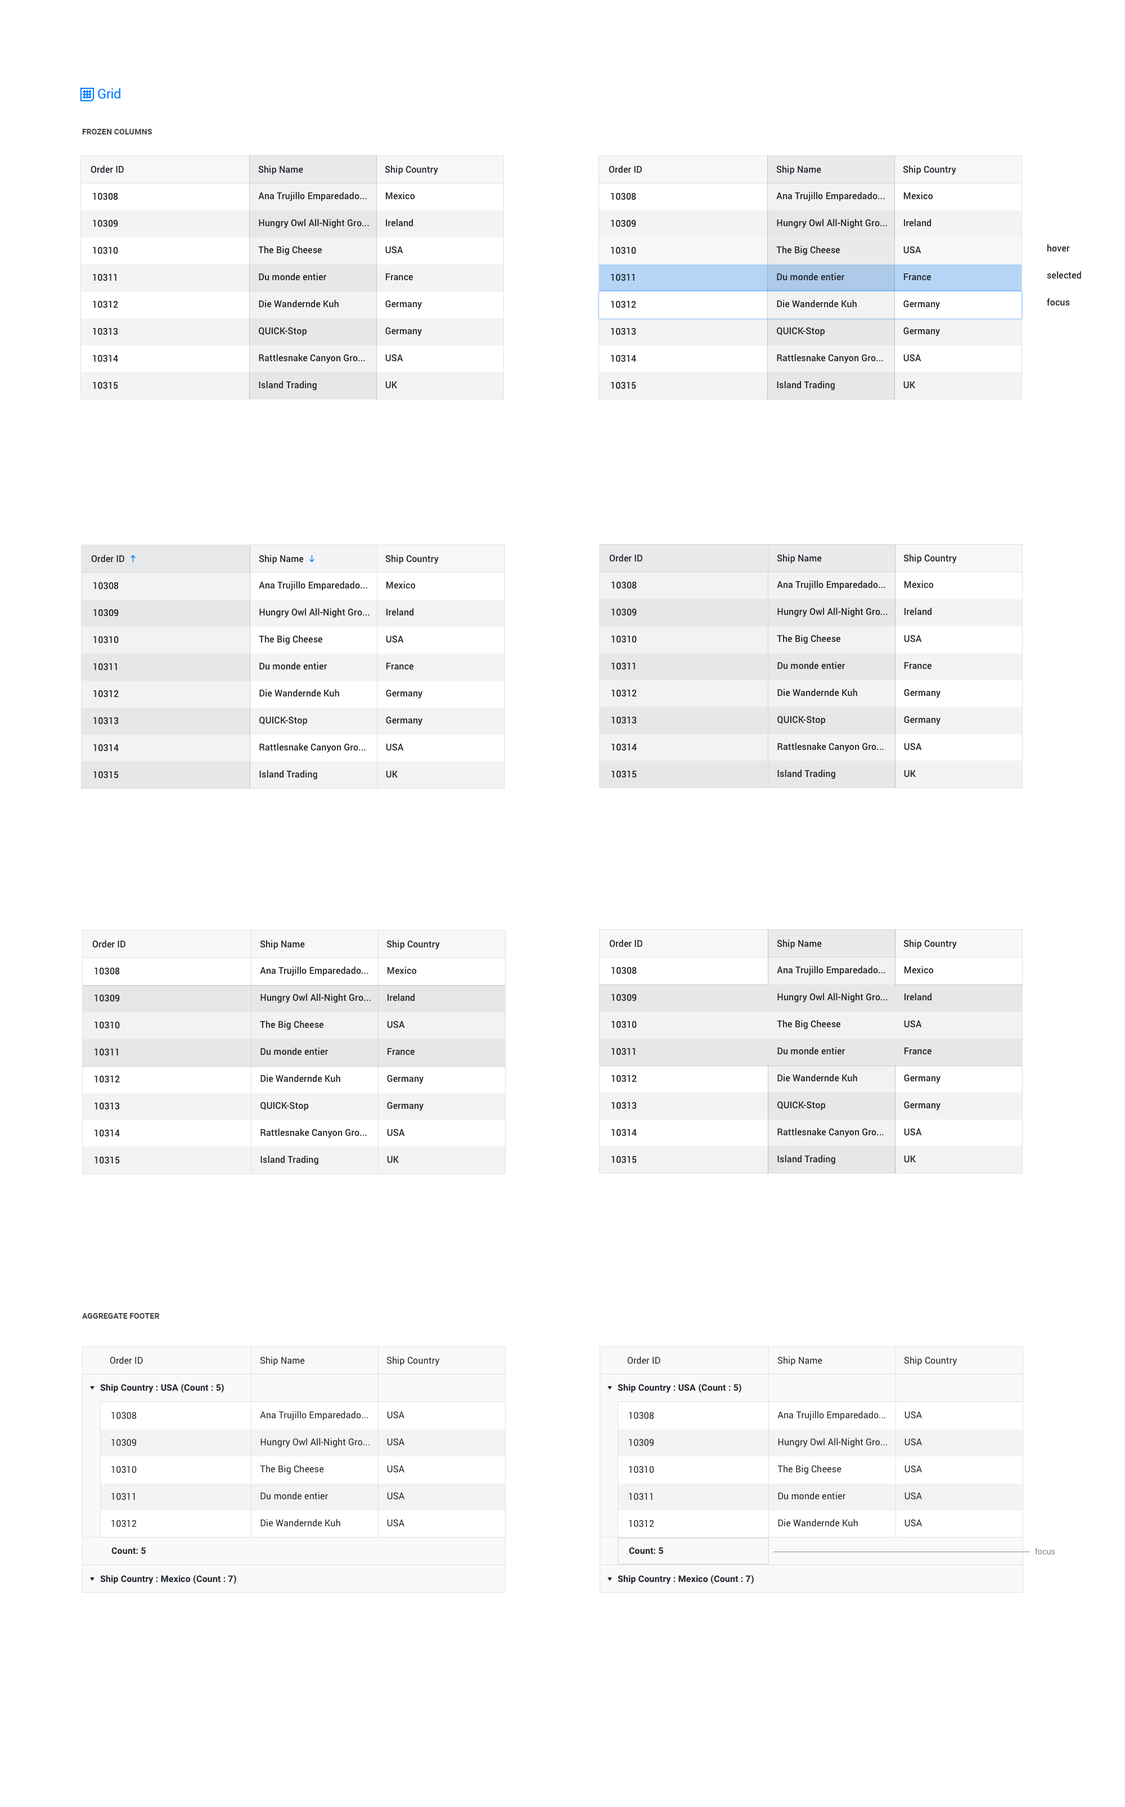
<style>
.page{position:relative;width:1125px;height:1807px;background:#ffffff}
.page>*{position:absolute;margin:0}
.t1{font:13.5px "Roboto-Regular";letter-spacing:-0.025em;color:#007bff}
.t2{font:7.9px "Roboto-Bold";letter-spacing:0.01em;color:#454545;text-transform:uppercase}
.t3{font:9px "Roboto-Medium";letter-spacing:0.01em;color:#212529}
.t4{font:9px/27px "Roboto-Medium";letter-spacing:0.01em;color:#212529}
.t5{font:9px "Roboto-Regular";letter-spacing:0.01em;color:#212529}
.t6{font:9px "Roboto-Bold";letter-spacing:0.01em;color:#212529}
.t7{font:9px/27px "Roboto-Regular";letter-spacing:0.01em;color:#212529}
.t8{font:7.9px "Roboto-Regular";letter-spacing:0.01em;color:#7e7e7e}
</style>
<div class="page">
<p class="t1" style="left:98px;top:88px;width:22px;height:11px">Grid</p>
<p class="t2" style="left:82px;top:129px;width:70px;height:5px">frozen columns</p>
<p class="t3" style="left:91px;top:165px;width:33px;height:8px">Order ID</p>
<p class="t3" style="left:258px;top:165px;width:45px;height:10px">Ship Name</p>
<p class="t3" style="left:385px;top:165px;width:53px;height:10px">Ship Country</p>
<p class="t3" style="left:609px;top:165px;width:33px;height:8px">Order ID</p>
<p class="t3" style="left:776px;top:165px;width:45px;height:10px">Ship Name</p>
<p class="t3" style="left:903px;top:165px;width:53px;height:10px">Ship Country</p>
<p class="t4" style="left:93px;top:192px;width:25px;height:197px">10308<br>10309<br>10310<br>10311<br>10312<br>10313<br>10314<br>10315</p>
<p class="t4" style="left:258px;top:192px;width:111px;height:198px">Ana Trujillo Emparedado...<br>Hungry Owl All-Night Gro...<br>The Big Cheese<br>Du monde entier<br>Die Wandernde Kuh<br>QUICK-Stop<br>Rattlesnake Canyon Gro...<br>Island Trading</p>
<p class="t4" style="left:385px;top:192px;width:37px;height:197px">Mexico<br>Ireland<br>USA<br>France<br>Germany<br>Germany<br>USA<br>UK</p>
<p class="t4" style="left:611px;top:192px;width:25px;height:197px">10308<br>10309<br>10310<br>10311<br>10312<br>10313<br>10314<br>10315</p>
<p class="t4" style="left:776px;top:192px;width:111px;height:198px">Ana Trujillo Emparedado...<br>Hungry Owl All-Night Gro...<br>The Big Cheese<br>Du monde entier<br>Die Wandernde Kuh<br>QUICK-Stop<br>Rattlesnake Canyon Gro...<br>Island Trading</p>
<p class="t4" style="left:903px;top:192px;width:37px;height:197px">Mexico<br>Ireland<br>USA<br>France<br>Germany<br>Germany<br>USA<br>UK</p>
<p class="t4" style="left:1047px;top:244px;width:34px;height:62px">hover<br>selected<br>focus</p>
<p class="t3" style="left:91px;top:555px;width:33px;height:7px">Order ID</p>
<p class="t3" style="left:259px;top:555px;width:45px;height:9px">Ship Name</p>
<p class="t3" style="left:385px;top:555px;width:54px;height:9px">Ship Country</p>
<p class="t3" style="left:609px;top:554px;width:33px;height:8px">Order ID</p>
<p class="t3" style="left:777px;top:554px;width:45px;height:10px">Ship Name</p>
<p class="t3" style="left:903px;top:554px;width:54px;height:10px">Ship Country</p>
<p class="t4" style="left:93px;top:582px;width:26px;height:196px">10308<br>10309<br>10310<br>10311<br>10312<br>10313<br>10314<br>10315</p>
<p class="t4" style="left:259px;top:581px;width:111px;height:199px">Ana Trujillo Emparedado...<br>Hungry Owl All-Night Gro...<br>The Big Cheese<br>Du monde entier<br>Die Wandernde Kuh<br>QUICK-Stop<br>Rattlesnake Canyon Gro...<br>Island Trading</p>
<p class="t4" style="left:386px;top:581px;width:36px;height:197px">Mexico<br>Ireland<br>USA<br>France<br>Germany<br>Germany<br>USA<br>UK</p>
<p class="t4" style="left:611px;top:581px;width:26px;height:197px">10308<br>10309<br>10310<br>10311<br>10312<br>10313<br>10314<br>10315</p>
<p class="t4" style="left:777px;top:580px;width:111px;height:199px">Ana Trujillo Emparedado...<br>Hungry Owl All-Night Gro...<br>The Big Cheese<br>Du monde entier<br>Die Wandernde Kuh<br>QUICK-Stop<br>Rattlesnake Canyon Gro...<br>Island Trading</p>
<p class="t4" style="left:904px;top:580px;width:36px;height:197px">Mexico<br>Ireland<br>USA<br>France<br>Germany<br>Germany<br>USA<br>UK</p>
<p class="t3" style="left:92px;top:940px;width:33px;height:8px">Order ID</p>
<p class="t3" style="left:260px;top:940px;width:45px;height:10px">Ship Name</p>
<p class="t3" style="left:386px;top:940px;width:54px;height:10px">Ship Country</p>
<p class="t3" style="left:609px;top:939px;width:33px;height:8px">Order ID</p>
<p class="t3" style="left:777px;top:939px;width:45px;height:10px">Ship Name</p>
<p class="t3" style="left:903px;top:939px;width:54px;height:10px">Ship Country</p>
<p class="t4" style="left:777px;top:966px;width:111px;height:198px">Ana Trujillo Emparedado...<br>Hungry Owl All-Night Gro...<br>The Big Cheese<br>Du monde entier<br>Die Wandernde Kuh<br>QUICK-Stop<br>Rattlesnake Canyon Gro...<br>Island Trading</p>
<p class="t4" style="left:904px;top:966px;width:36px;height:197px">Mexico<br>Ireland<br>USA<br>France<br>Germany<br>Germany<br>USA<br>UK</p>
<p class="t4" style="left:94px;top:967px;width:26px;height:197px">10308<br>10309<br>10310<br>10311<br>10312<br>10313<br>10314<br>10315</p>
<p class="t4" style="left:260px;top:966px;width:111px;height:199px">Ana Trujillo Emparedado...<br>Hungry Owl All-Night Gro...<br>The Big Cheese<br>Du monde entier<br>Die Wandernde Kuh<br>QUICK-Stop<br>Rattlesnake Canyon Gro...<br>Island Trading</p>
<p class="t4" style="left:387px;top:966px;width:37px;height:197px">Mexico<br>Ireland<br>USA<br>France<br>Germany<br>Germany<br>USA<br>UK</p>
<p class="t4" style="left:611px;top:966px;width:26px;height:197px">10308<br>10309<br>10310<br>10311<br>10312<br>10313<br>10314<br>10315</p>
<p class="t2" style="left:82px;top:1313px;width:78px;height:5px">aggregate footer</p>
<p class="t5" style="left:110px;top:1356px;width:33px;height:8px">Order ID</p>
<p class="t5" style="left:260px;top:1356px;width:45px;height:10px">Ship Name</p>
<p class="t5" style="left:386px;top:1356px;width:53px;height:10px">Ship Country</p>
<p class="t5" style="left:627px;top:1356px;width:33px;height:8px">Order ID</p>
<p class="t5" style="left:777px;top:1356px;width:45px;height:10px">Ship Name</p>
<p class="t5" style="left:904px;top:1356px;width:53px;height:10px">Ship Country</p>
<p class="t6" style="left:100px;top:1383px;width:124px;height:10px">Ship Country : USA (Count : 5)</p>
<p class="t6" style="left:618px;top:1383px;width:123px;height:10px">Ship Country : USA (Count : 5)</p>
<p class="t7" style="left:111px;top:1411px;width:26px;height:116px">10308<br>10309<br>10310<br>10311<br>10312</p>
<p class="t7" style="left:260px;top:1411px;width:110px;height:116px">Ana Trujillo Emparedado...<br>Hungry Owl All-Night Gro...<br>The Big Cheese<br>Du monde entier<br>Die Wandernde Kuh</p>
<p class="t7" style="left:387px;top:1411px;width:17px;height:116px">USA<br>USA<br>USA<br>USA<br>USA</p>
<p class="t7" style="left:629px;top:1411px;width:25px;height:116px">10308<br>10309<br>10310<br>10311<br>10312</p>
<p class="t7" style="left:777px;top:1411px;width:110px;height:116px">Ana Trujillo Emparedado...<br>Hungry Owl All-Night Gro...<br>The Big Cheese<br>Du monde entier<br>Die Wandernde Kuh</p>
<p class="t7" style="left:904px;top:1411px;width:18px;height:116px">USA<br>USA<br>USA<br>USA<br>USA</p>
<p class="t6" style="left:111px;top:1547px;width:35px;height:7px">Count: 5</p>
<p class="t6" style="left:629px;top:1547px;width:34px;height:7px">Count: 5</p>
<p class="t8" style="left:1035px;top:1548px;width:20px;height:6px">focus</p>
<p class="t6" style="left:100px;top:1574px;width:136px;height:10px">Ship Country : Mexico (Count : 7)</p>
<p class="t6" style="left:618px;top:1574px;width:136px;height:10px">Ship Country : Mexico (Count : 7)</p>
</div>
